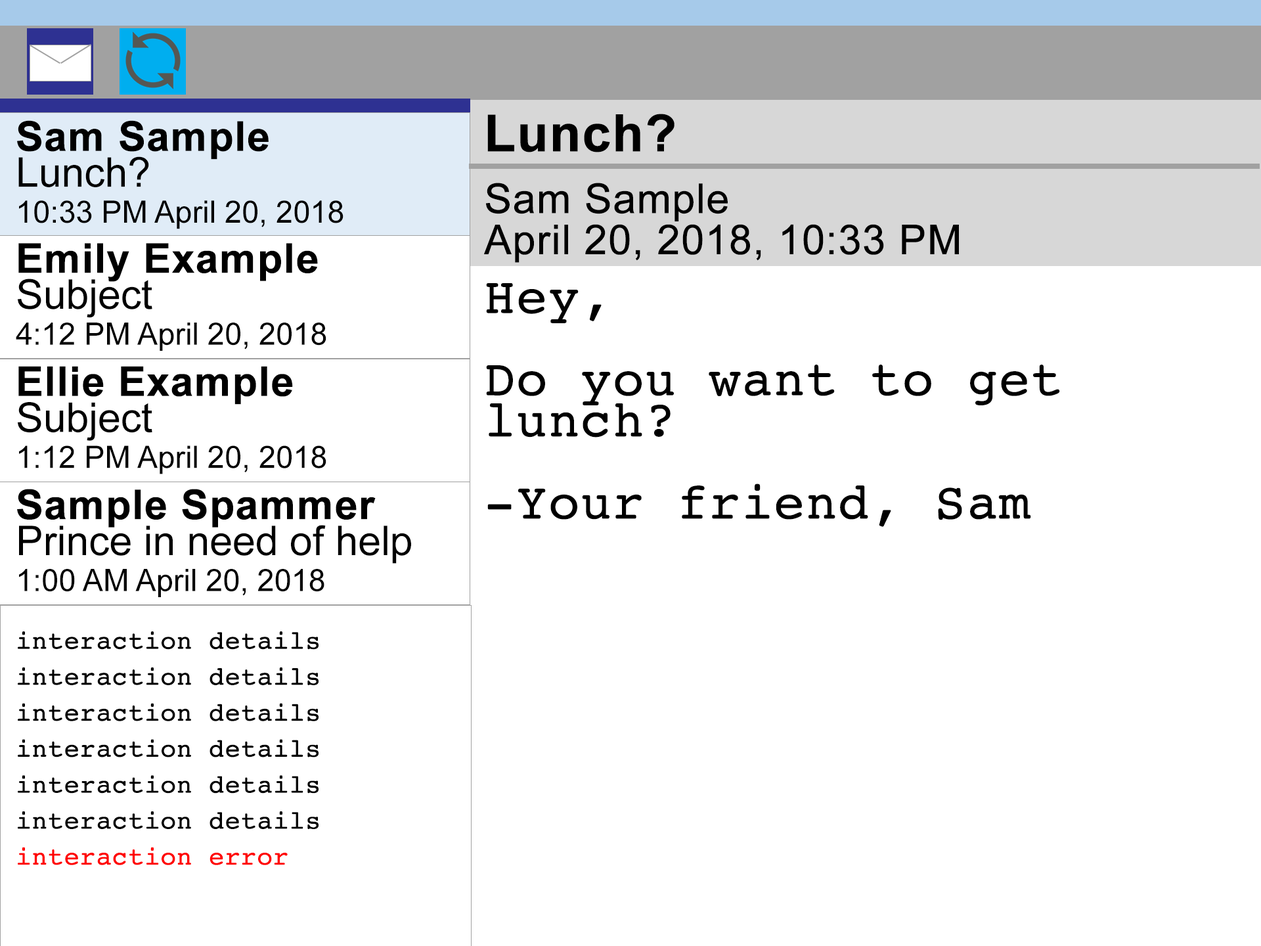
<style>
.page{position:relative;width:1261px;height:946px;background:#ffffff}
.page>*{position:absolute;margin:0}
.t1{font:41px/20.6px "ArialMT";color:#000000;font-weight:bold}
.t2{font:51.3px/20.6px "Arial-BoldMT";color:#000000;font-weight:bold}
.t3{font:30.8px/36px "ArialMT";color:#000000}
.t4{font:41px/36px "Arial-BoldMT";color:#000000;font-weight:bold}
.t5{font:41px/36px "ArialMT";color:#000000}
.t6{font:51.3px/41.1px "Courier";color:#000000;font-weight:bold}
.t7{font:25.7px/36px "Courier";color:#000000;font-weight:bold}
.t8{font:25.7px/36px "Courier";color:#ff0000;font-weight:bold}
</style>
<div class="page">
<p class="t1" style="left:484px;top:114px;width:475px;height:149px"><span class="t2">Lunch?<br></span><br><br>Sam Sample<br><br>April 20, 2018, 10:33 PM</p>
<p class="t3" style="left:17px;top:120px;width:326px;height:109px"><span class="t4">Sam Sample<br></span><span class="t5">Lunch?<br></span>10:33 PM April 20, 2018</p>
<p class="t3" style="left:16px;top:243px;width:310px;height:108px"><span class="t4">Emily Example<br></span><span class="t5">Subject<br></span>4:12 PM April 20, 2018</p>
<p class="t6" style="left:486px;top:283px;width:574px;height:244px">Hey,<br><br>Do you want to get lunch?<br><br>-Your friend, Sam</p>
<p class="t3" style="left:18px;top:366px;width:308px;height:108px"><span class="t4">Ellie Example<br></span><span class="t5">Subject<br></span>1:12 PM April 20, 2018</p>
<p class="t5" style="left:17px;top:489px;width:394px;height:108px"><span class="t4">Sample Spammer<br></span>Prince in need of help<br><span class="t3">1:00 AM April 20, 2018</span></p>
<p class="t7" style="left:18px;top:631px;width:301px;height:234px">interaction details<br>interaction details<br>interaction details<br>interaction details<br>interaction details<br>interaction details<br><span class="t8">interaction error</span></p>
</div>
